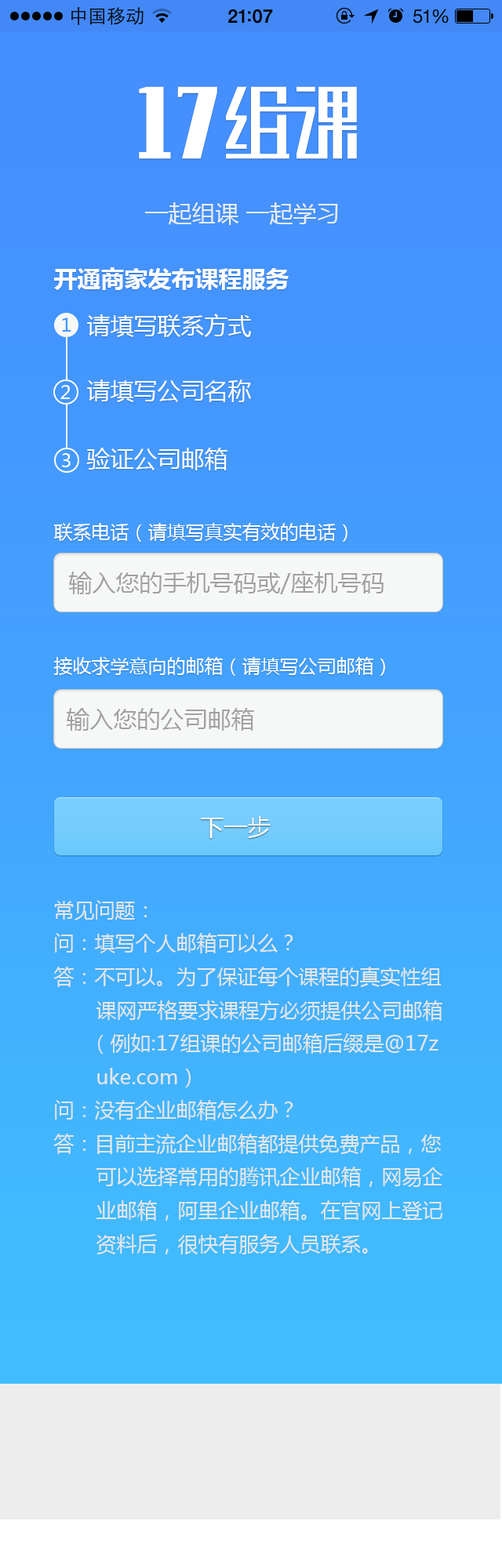
<style>
.page{position:relative;width:502px;height:1568px}
.page>*{position:absolute;margin:0}
.t1{font:23.5px "MicrosoftYaHei";color:#ededed}
.t2{font:23.5px "MicrosoftYaHei-Bold";color:#fefefe}
.t3{font:18.8px "MicrosoftYaHei";color:#4499ff}
.t4{font:23.5px "MicrosoftYaHei";color:#fefefe}
.t5{font:18.8px "MicrosoftYaHei";color:#ffffff}
.t6{font:18.8px "MicrosoftYaHei";color:#fefefe}
.t7{font:23.5px "MicrosoftYaHei";color:#a1a1a1}
.t8{font:20.4px "MicrosoftYaHei";color:#e6e6e6}
</style>
<div class="page">
<p class="t1" style="left:145px;top:202px;width:193px;height:23px">一起组课 一起学习</p>
<p class="t2" style="left:54px;top:267px;width:235px;height:23px">开通商家发布课程服务</p>
<p class="t3" style="left:62px;top:318px;width:9px;height:14px">1</p>
<p class="t4" style="left:87px;top:314px;width:164px;height:23px">请填写联系方式</p>
<p class="t5" style="left:60px;top:385px;width:10px;height:14px">2</p>
<p class="t4" style="left:87px;top:379px;width:164px;height:23px">请填写公司名称</p>
<p class="t4" style="left:86px;top:448px;width:141px;height:22px">验证公司邮箱</p>
<p class="t5" style="left:62px;top:453px;width:9px;height:14px">3</p>
<p class="t6" style="left:53px;top:523px;width:294px;height:19px">联系电话（请填写真实有效的电话）</p>
<p class="t7" style="left:69px;top:571px;width:314px;height:23px">输入您的手机号码或/座机号码</p>
<p class="t6" style="left:53px;top:657px;width:332px;height:19px">接收求学意向的邮箱（请填写公司邮箱）</p>
<p class="t7" style="left:67px;top:708px;width:187px;height:23px">输入您的公司邮箱</p>
<p class="t4" style="left:201px;top:816px;width:69px;height:22px">下一步</p>
<p class="t8" style="left:53px;top:900px;width:390px;height:355px">常见问题：<br>问：填写个人邮箱可以么？<br>答：不可以。为了保证每个课程的真实性组<br>       课网严格要求课程方必须提供公司邮箱<br>      （例如:17组课的公司邮箱后缀是@17z<br>       uke.com）<br>问：没有企业邮箱怎么办？<br>答：目前主流企业邮箱都提供免费产品，您<br>       可以选择常用的腾讯企业邮箱，网易企<br>       业邮箱，阿里企业邮箱。在官网上登记<br>       资料后，很快有服务人员联系。</p>
</div>
